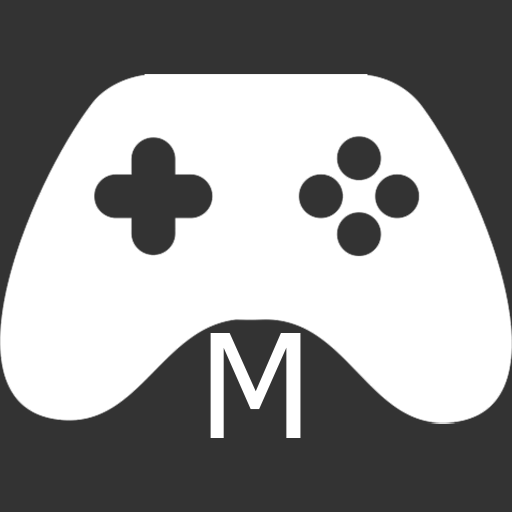
<style>
.page{position:relative;width:512px;height:512px;background:#333333}
.page>*{position:absolute;margin:0}
.t1{font:144px "Tahoma";color:#ffffff}
</style>
<div class="page">
<p class="t1" style="left:210px;top:333px;width:91px;height:105px">M</p>
</div>
